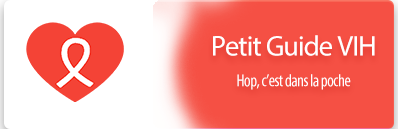
<style>
.page{position:relative;width:398px;height:129px;background:#f55044}
.page>*{position:absolute;margin:0}
.t1{font:17.5px/30.6px "MyriadPro-Cond";letter-spacing:-0.034em;color:#ffffff}
.t2{font:28.5px/30.6px "MyriadPro-Regular";letter-spacing:-0.034em;color:#ffffff}
</style>
<div class="page">
<p class="t1" style="left:213px;top:35px;width:162px;height:55px;text-align:center"><span class="t2">Petit Guide VIH</span><br>Hop, c’est dans la poche</p>
</div>
